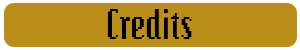
<style>
.page{position:relative;width:300px;height:50px;background:#ba8e18}
.page>*{position:absolute;margin:0}
.t1{font:42px "Bitmap";color:#000000}
</style>
<div class="page">
<p class="t1" style="left:107px;top:9px;width:85px;height:30px">Credits</p>
</div>
